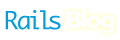
<style>
.page{position:relative;width:120px;height:40px;background:#ffffff}
.page>*{position:absolute;margin:0}
.t1{font:24px "Monaco";color:#049cdb}
.t2{font:24px "Arial-Black";color:#fefefe}
</style>
<div class="page">
<p class="t1" style="left:5px;top:10px;width:56px;height:20px">Rails</p>
<p class="t2" style="left:65px;top:11px;width:50px;height:23px">Blog</p>
</div>
